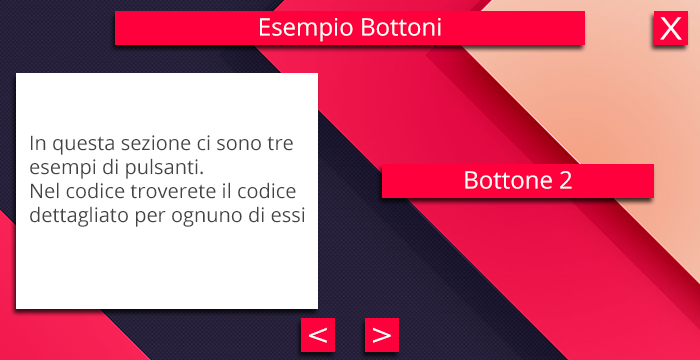
<style>
.page{position:relative;width:700px;height:360px;background:#ffffff}
.page>*{position:absolute;margin:0}
.t1{font:31px "OpenSans";color:#ffffff;scale:1.23 1}
.t2{font:23.9px "OpenSans";color:#ffffff}
.t3{font:20px "OpenSans";color:#444444}
</style>
<div class="page">
<p class="t1" style="left:660px;top:17px;width:22px;height:23px">X</p>
<p class="t2" style="left:260px;top:18px;width:181px;height:24px">Esempio Bottoni</p>
<p class="t3" style="left:30px;top:135px;width:275px;height:92px;text-align:justify">In questa sezione ci sono tre <br>esempi di pulsanti.<br>Nel codice troverete il codice<br>dettagliato per ognuno di essi</p>
<p class="t2" style="left:465px;top:171px;width:107px;height:18px">Bottone 2</p>
<p class="t1" style="left:309px;top:327px;width:18px;height:16px">&lt;</p>
<p class="t1" style="left:373px;top:327px;width:18px;height:16px">&gt;</p>
</div>
